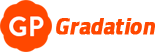
<style>
.page{position:relative;width:166px;height:52px;background:#ffffff}
.page>*{position:absolute;margin:0}
.t1{font:22.5px "Cairo-Bold";color:#ff4800;font-weight:bold;font-style:italic}
</style>
<div class="page">
<p class="t1" style="left:56px;top:18px;width:99px;height:17px">Gradation</p>
</div>
